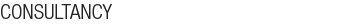
<style>
.page{position:relative;width:355px;height:25px;background:#ffffff}
.page>*{position:absolute;margin:0}
.t1{font:21px "HelveticaNeueLTPro-LtCn";color:#252525}
</style>
<div class="page">
<p class="t1" style="left:1px;top:4px;width:111px;height:15px">CONSULTANCY</p>
</div>
